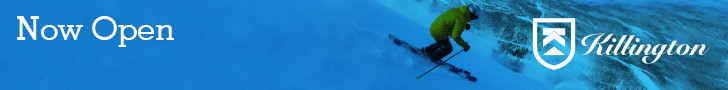
<style>
.page{position:relative;width:728px;height:90px}
.page>*{position:absolute;margin:0}
.t1{font:33.3px "GeometricSlab703BT-Medium";letter-spacing:-0.01em;color:#ffffff}
</style>
<div class="page">
<p class="t1" style="left:17px;top:16px;width:157px;height:31px">Now Open</p>
</div>
